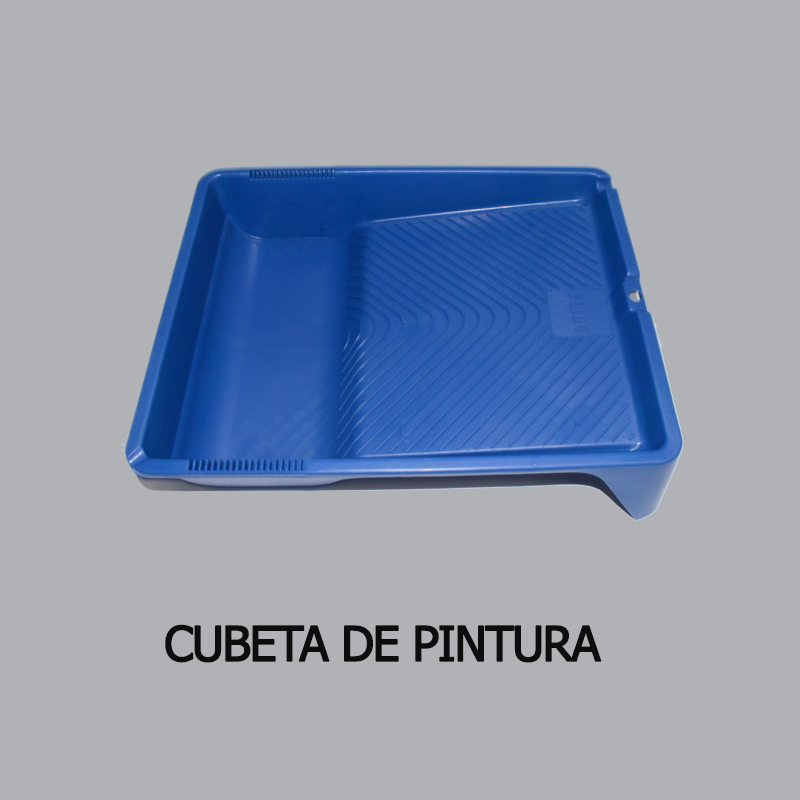
<style>
.page{position:relative;width:800px;height:800px;background:#b0b2b5}
.page>*{position:absolute;margin:0}
.t1{font:48px "Tahoma";letter-spacing:-0.05em;color:#0c0d0d;font-weight:bold}
</style>
<div class="page">
<p class="t1" style="left:165px;top:624px;width:437px;height:39px">CUBETA DE PINTURA</p>
</div>
